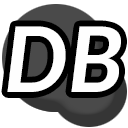
<style>
.page{position:relative;width:128px;height:128px;background:#ffffff}
.page>*{position:absolute;margin:0}
.t1{font:90.5px "Lato-BoldItalic";color:#fefefe}
</style>
<div class="page">
<p class="t1" style="left:7px;top:26px;width:114px;height:66px">DB</p>
</div>
